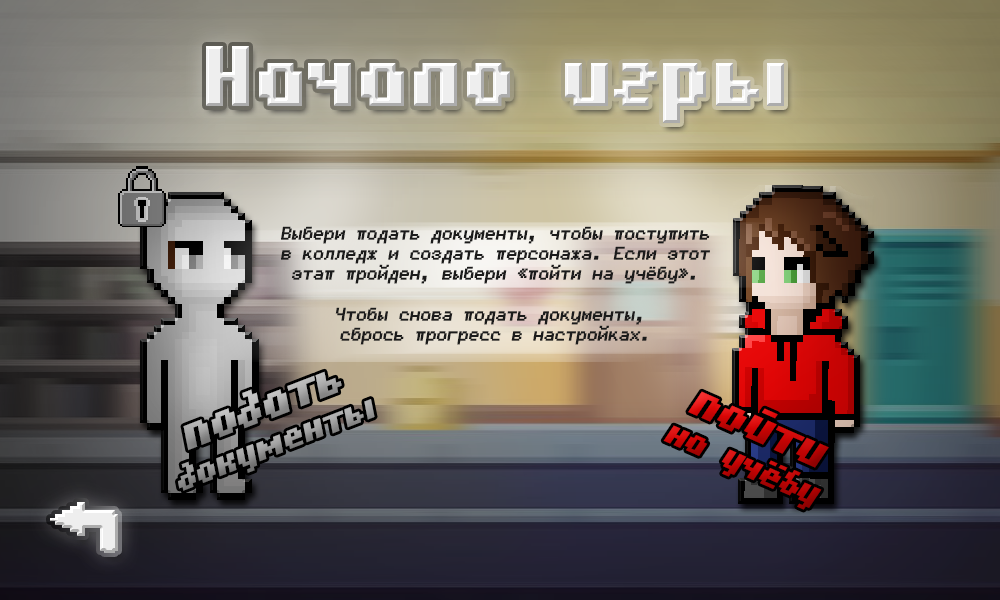
<style>
.page{position:relative;width:1000px;height:600px}
.page>*{position:absolute;margin:0}
.t1{font:85px "Hardpixel";letter-spacing:0.025em;color:#eeeeee}
.t2{font:22px/20.1px "Fifaks1.0dev1";color:#1b1b1b;font-weight:bold;font-style:italic;scale:0.92 1}
</style>
<div class="page">
<p class="t1" style="left:206px;top:46px;width:578px;height:77px">Начало игры</p>
<p class="t2" style="left:281px;top:226px;width:429px;height:119px;text-align:center">Выбери подать документы, чтобы поступить<br>в колледж и создать персонажа. Если этот<br>этап пройден, выбери «пойти на учёбу».<br><br>Чтобы снова подать документы, <br>сбрось прогресс в настройках.</p>
</div>
